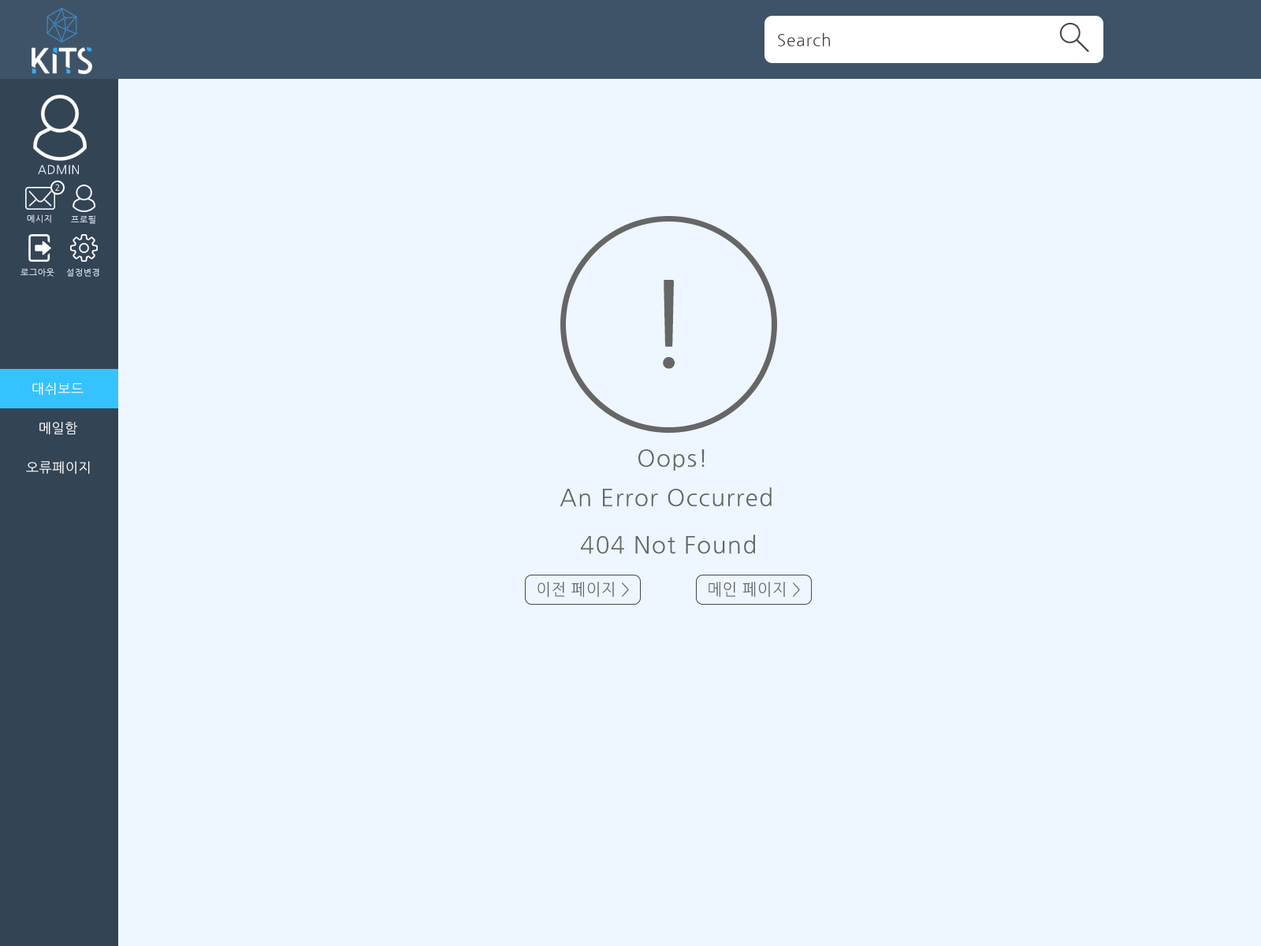
<style>
.page{position:relative;width:1261px;height:946px;background:#eef7ff}
.page>*{position:absolute;margin:0}
.t1{font:16.5px "NanumGothic";letter-spacing:0.04em;color:#444444}
.t2{font:11.8px "NanumGothic";letter-spacing:0.04em;color:#eef7ff}
.t3{font:8.7px "NanumGothic";letter-spacing:0.04em;color:#ffffff;scale:0.93 1}
.t4{font:8.7px "NanumGothic";letter-spacing:0.04em;color:#eef7ff}
.t5{font:118.2px "NanumGothic";letter-spacing:0.04em;color:#666666}
.t6{font:13.4px "NanumGothic";letter-spacing:0.04em;color:#ffffff}
.t7{font:23.6px "NanumGothic";letter-spacing:0.04em;color:#666666}
.t8{font:16.3px "NanumGothic";letter-spacing:0.04em;color:#666666;scale:0.94 1}
</style>
<div class="page">
<p class="t1" style="left:778px;top:32px;width:52px;height:14px">Search</p>
<p class="t2" style="left:38px;top:165px;width:41px;height:9px">ADMIN</p>
<p class="t3" style="left:55px;top:184px;width:4px;height:7px">2</p>
<p class="t4" style="left:27px;top:214px;width:24px;height:9px">메시지</p>
<p class="t4" style="left:71px;top:215px;width:24px;height:9px">프로필</p>
<p class="t4" style="left:20px;top:268px;width:34px;height:9px">로그아웃</p>
<p class="t4" style="left:66px;top:268px;width:33px;height:9px">설정변경</p>
<p class="t5" style="left:663px;top:280px;width:12px;height:89px">!</p>
<p class="t6" style="left:32px;top:382px;width:52px;height:13px">대쉬보드</p>
<p class="t6" style="left:39px;top:422px;width:38px;height:12px">메일함</p>
<p class="t7" style="left:638px;top:449px;width:67px;height:21px">Oops!</p>
<p class="t6" style="left:26px;top:461px;width:64px;height:13px">오류페이지</p>
<p class="t7" style="left:560px;top:487px;width:212px;height:20px">An Error Occurred</p>
<p class="t7" style="left:581px;top:534px;width:174px;height:20px">404 Not Found</p>
<p class="t8" style="left:537px;top:582px;width:92px;height:15px">이전 페이지 &gt;</p>
<p class="t8" style="left:708px;top:582px;width:92px;height:15px">메인 페이지 &gt;</p>
</div>
